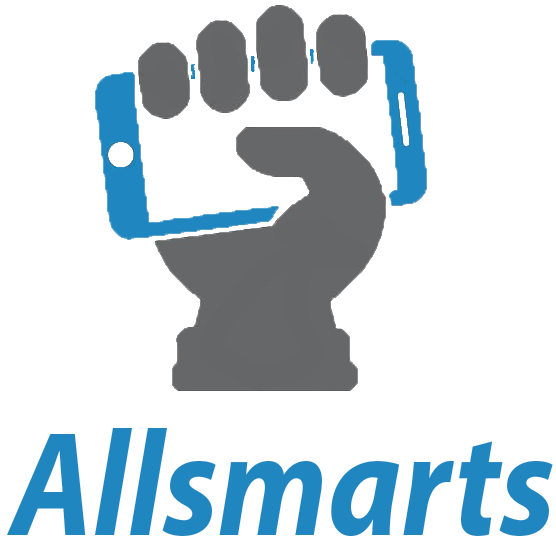
<style>
.page{position:relative;width:556px;height:547px;background:#ffffff}
.page>*{position:absolute;margin:0}
.t1{font:150px "MyriadPro-BoldIt";color:#1f86c0;scale:0.88 1}
</style>
<div class="page">
<p class="t1" style="left:7px;top:428px;width:546px;height:109px">Allsmarts</p>
</div>
